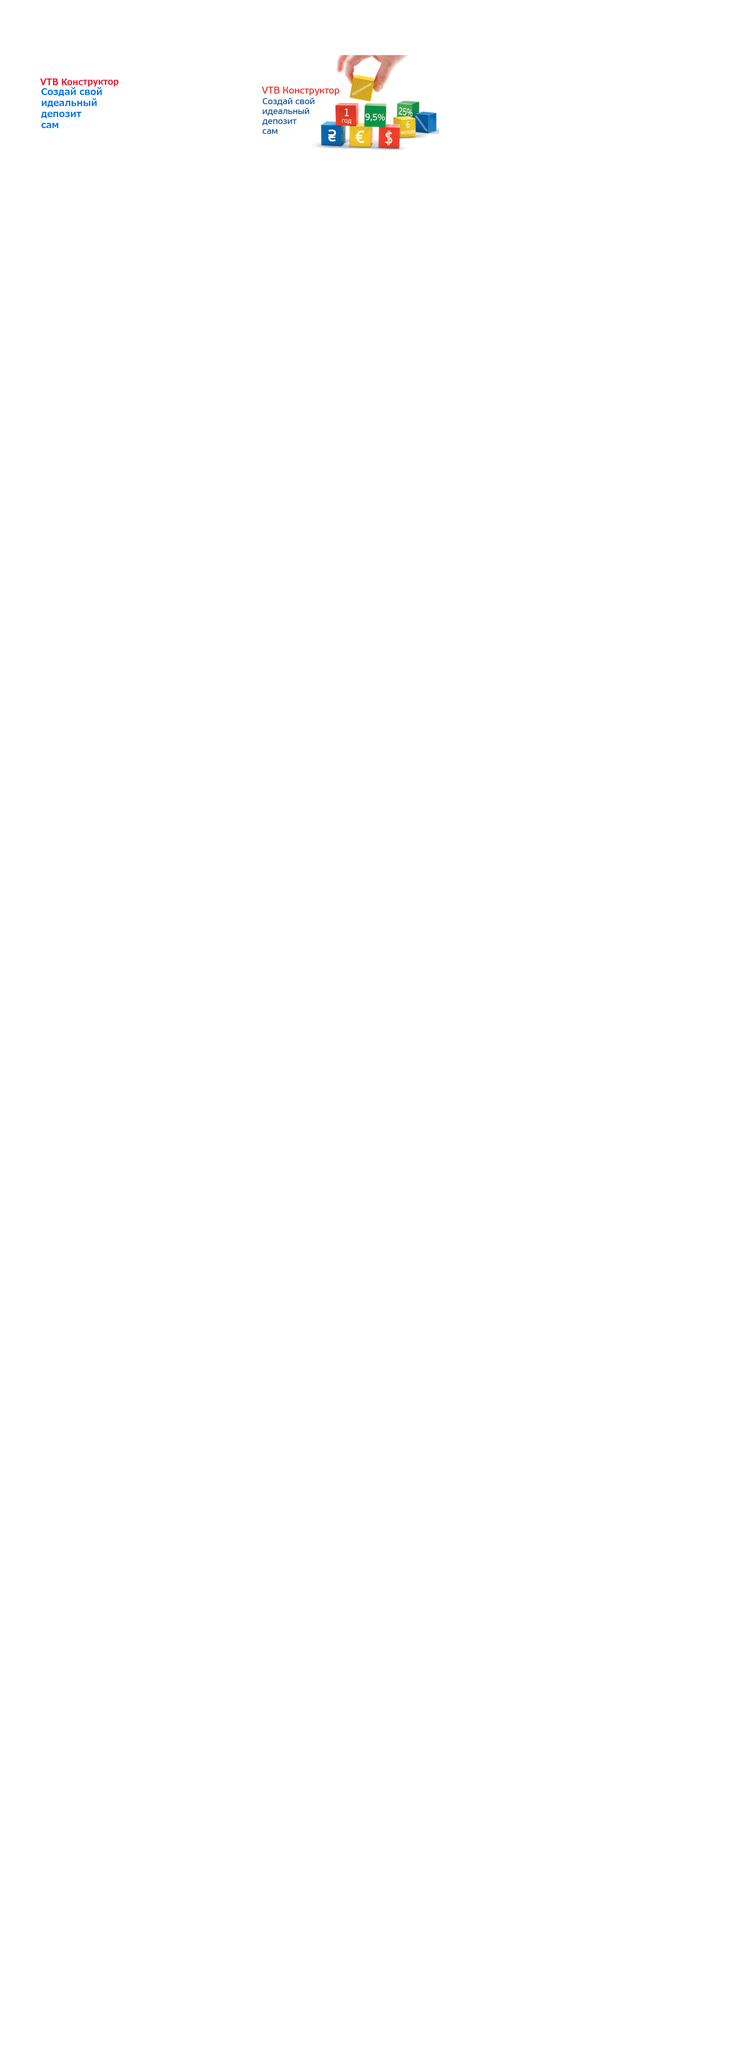
<style>
.page{position:relative;width:730px;height:2053px;background:#ffffff}
.page>*{position:absolute;margin:0}
.t1{font:8.9px "Meiryo-Bold";color:#f30b2c;scale:0.94 1}
.t2{font:9.1px "Meiryo-Bold";color:#f30b2c;scale:0.94 1}
.t3{font:9.1px "Meiryo-Bold";color:#0074f6}
</style>
<div class="page">
<p class="t1" style="left:40px;top:78px;width:79px;height:9px"><span class="t2">VTB</span> Конструктор</p>
<p class="t3" style="left:41px;top:87px;width:61px;height:41px;text-align:right">Создай свой<br>идеальный <br>депозит<br>сам</p>
</div>
